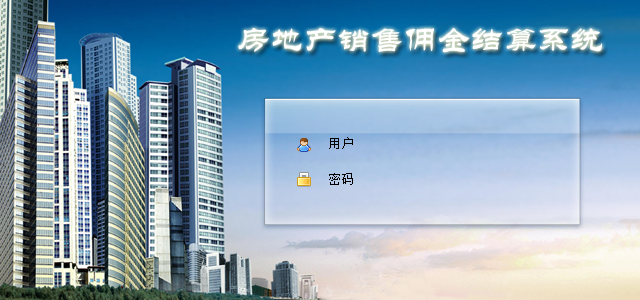
<style>
.page{position:relative;width:640px;height:300px}
.page>*{position:absolute;margin:0}
.t1{font:33.3px "STLiti";color:#ffffff}
.t2{font:12.5px "SimSun";color:#000000}
</style>
<div class="page">
<p class="t1" style="left:238px;top:28px;width:364px;height:25px">房地产销售佣金结算系统</p>
<p class="t2" style="left:329px;top:137px;width:24px;height:12px">用户</p>
<p class="t2" style="left:329px;top:173px;width:24px;height:12px">密码</p>
</div>
